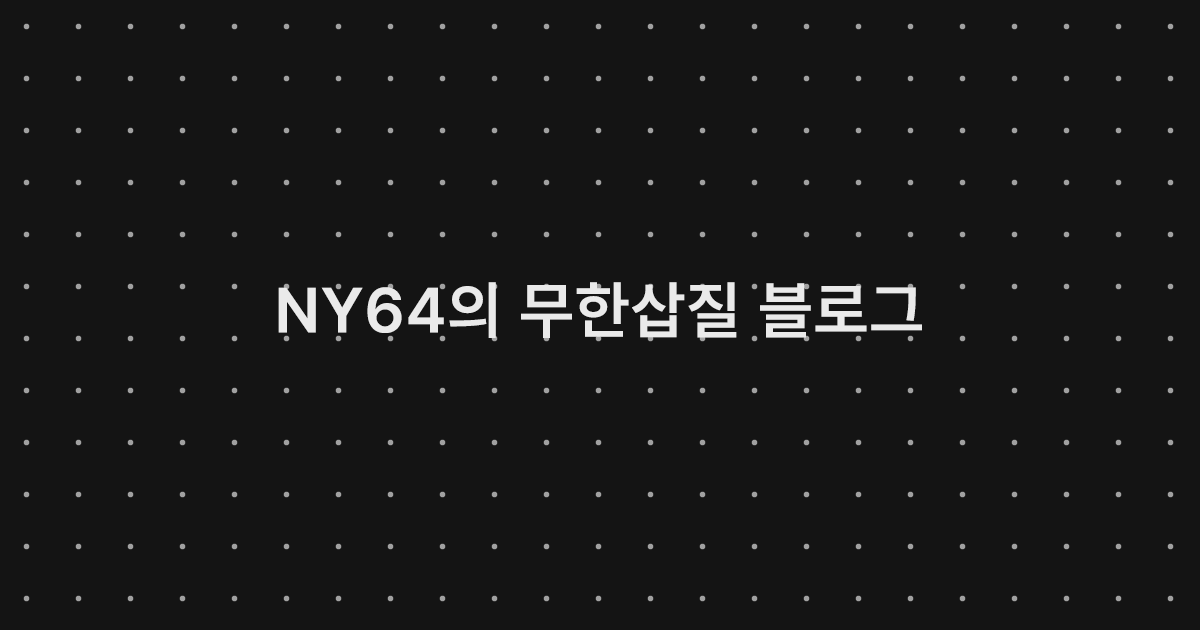
<style>
.page{position:relative;width:1200px;height:630px;background:#141414}
.page>*{position:absolute;margin:0}
.t1{font:62.9px "Pretendard-SemiBold";letter-spacing:0.02em;color:#eaeaea}
</style>
<div class="page">
<p class="t1" style="left:278px;top:282px;width:644px;height:56px">NY64의 무한삽질 블로그</p>
</div>
